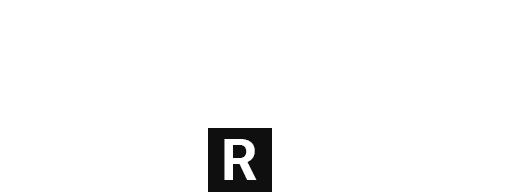
<style>
.page{position:relative;width:528px;height:192px;background:#ffffff}
.page>*{position:absolute;margin:0}
.t1{font:57px "Roboto-Bold";color:#ffffff}
</style>
<div class="page">
<p class="t1" style="left:224px;top:139px;width:33px;height:41px">R</p>
</div>
